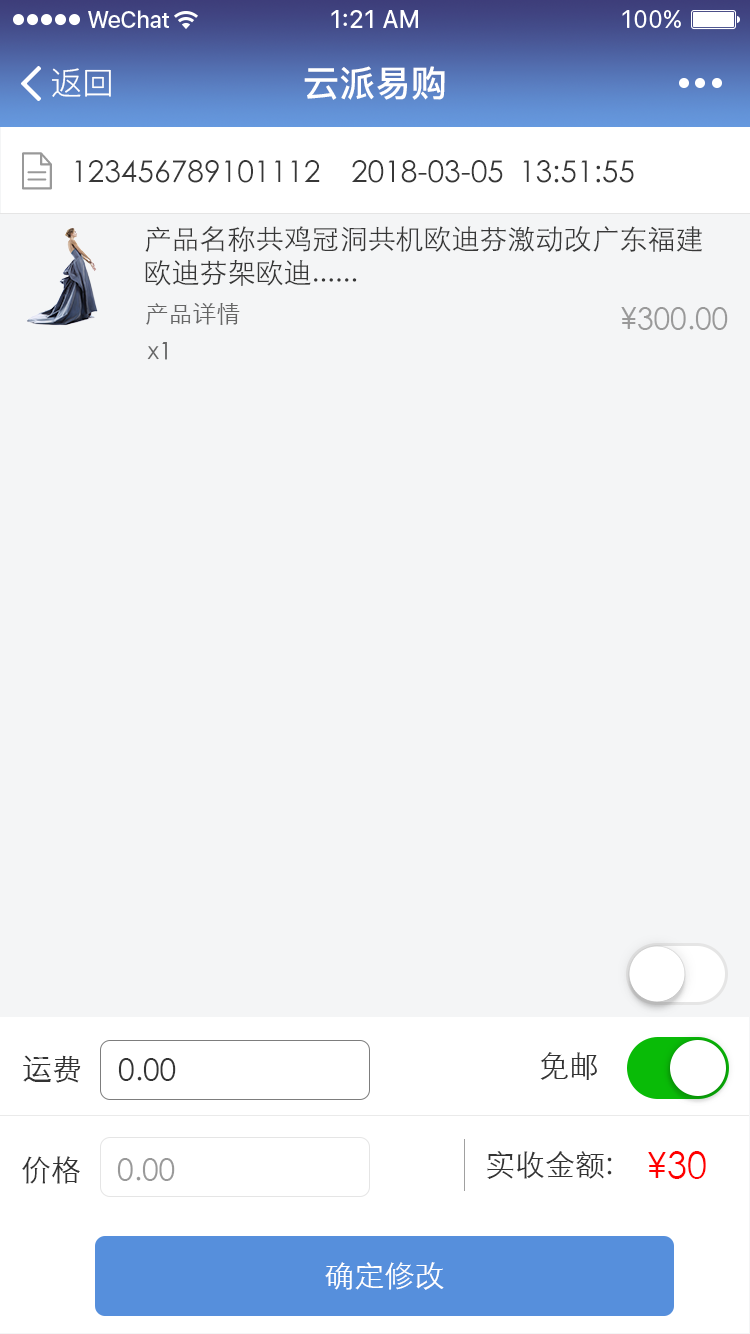
<style>
.page{position:relative;width:750px;height:1334px;background:#f4f5f6}
.page>*{position:absolute;margin:0}
.t1{font:32px "PingFang-SC-Regular";color:#ffffff}
.t2{font:36px "PingFang-SC-Bold";color:#ffffff}
.t3{font:30px "STXihei";color:#373737}
.t4{font:28px "STXihei";color:#373737}
.t5{font:24px "STXihei";color:#666666}
.t6{font:30px "STXihei";color:#999999}
.t7{font:30px "STXihei";color:#333333}
.t8{font:36px "STXihei";color:#ff0000}
.t9{font:30px "STXihei";color:#ffffff}
</style>
<div class="page">
<p class="t1" style="left:52px;top:68px;width:59px;height:29px">返回</p>
<p class="t2" style="left:304px;top:66px;width:141px;height:34px">云派易购</p>
<p class="t3" style="left:75px;top:160px;width:245px;height:23px">123456789101112</p>
<p class="t3" style="left:352px;top:160px;width:282px;height:23px">2018-03-05  13:51:55</p>
<p class="t4" style="left:145px;top:226px;width:557px;height:60px">产品名称共鸡冠洞共机欧迪芬激动改广东福建欧迪芬架欧迪......</p>
<p class="t5" style="left:146px;top:303px;width:94px;height:22px">产品详情</p>
<p class="t6" style="left:621px;top:307px;width:107px;height:23px">¥300.00</p>
<p class="t5" style="left:147px;top:342px;width:20px;height:18px">x1</p>
<p class="t7" style="left:23px;top:1055px;width:58px;height:28px">运费</p>
<p class="t7" style="left:118px;top:1058px;width:58px;height:23px">0.00</p>
<p class="t7" style="left:540px;top:1052px;width:57px;height:28px">免邮</p>
<p class="t7" style="left:22px;top:1156px;width:58px;height:28px">价格</p>
<p class="t6" style="left:117px;top:1158px;width:58px;height:23px">0.00</p>
<p class="t7" style="left:487px;top:1151px;width:125px;height:28px">实收金额:</p>
<p class="t8" style="left:648px;top:1151px;width:58px;height:28px">¥30</p>
<p class="t9" style="left:325px;top:1262px;width:119px;height:28px">确定修改</p>
</div>
